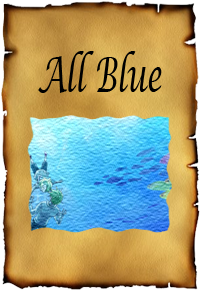
<style>
.page{position:relative;width:200px;height:290px}
.page>*{position:absolute;margin:0}
.t1{font:48px "LucidaCalligraphy-Italic";color:#000000;scale:0.6 1}
</style>
<div class="page">
<p class="t1" style="left:38px;top:51px;width:124px;height:42px">All Blue</p>
</div>
